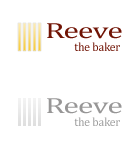
<style>
.page{position:relative;width:138px;height:151px;background:#ffffff}
.page>*{position:absolute;margin:0}
.t1{font:22.1px "Cambria";letter-spacing:-0.025em;color:#701304;scale:1.44 1}
.t2{font:12px "Cambria";letter-spacing:-0.025em;color:#701304}
.t3{font:22.1px "Cambria";letter-spacing:-0.025em;color:#979696;scale:1.44 1}
.t4{font:12px "Cambria";letter-spacing:-0.025em;color:#9d9d9d}
</style>
<div class="page">
<p class="t1" style="left:47px;top:23px;width:75px;height:16px">Reeve</p>
<p class="t2" style="left:74px;top:42px;width:46px;height:9px">the baker</p>
<p class="t3" style="left:47px;top:98px;width:75px;height:16px">Reeve</p>
<p class="t4" style="left:74px;top:117px;width:46px;height:9px">the baker</p>
</div>
